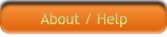
<style>
.page{position:relative;width:167px;height:37px}
.page>*{position:absolute;margin:0}
.t1{font:15px "TrebuchetMS";color:#cecb79}
</style>
<div class="page">
<p class="t1" style="left:40px;top:12px;width:88px;height:16px">About / Help</p>
</div>
